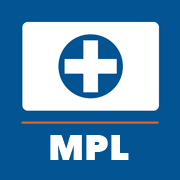
<style>
.page{position:relative;width:180px;height:180px;background:#025493}
.page>*{position:absolute;margin:0}
.t1{font:36px "AvenirNext-Heavy";color:#ffffff}
</style>
<div class="page">
<p class="t1" style="left:50px;top:135px;width:79px;height:25px">MPL</p>
</div>
